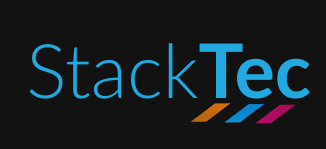
<style>
.page{position:relative;width:326px;height:149px;background:#121212}
.page>*{position:absolute;margin:0}
.t1{font:75.3px "Lato-Light";color:#21a9e0}
.t2{font:75.3px "Lato-Bold";color:#21a9e0}
</style>
<div class="page">
<p class="t1" style="left:29px;top:43px;width:281px;height:56px">Stack<span class="t2">Tec</span></p>
</div>
